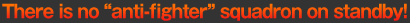
<style>
.page{position:relative;width:410px;height:23px;background:#333333}
.page>*{position:absolute;margin:0}
.t1{font:18.5px "GothicMB101Pro-Bold";letter-spacing:-0.04em;scale:0.9 1}
</style>
<div class="page">
<p class="t1" style="left:2px;top:3px;width:405px;height:18px">There is no “anti-fighter” squadron on standby!</p>
</div>
